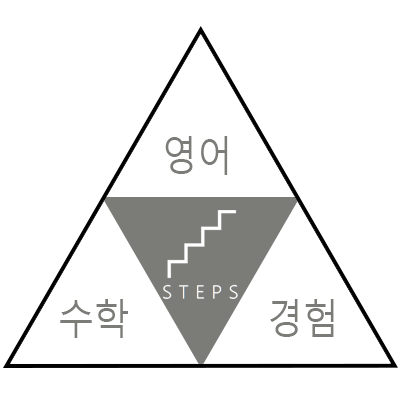
<style>
.page{position:relative;width:400px;height:400px;background:#ffffff}
.page>*{position:absolute;margin:0}
.t1{font:41.7px "MalgunGothicRegular";color:#7b7b78;scale:0.86 1}
</style>
<div class="page">
<p class="t1" style="left:165px;top:136px;width:63px;height:39px">영어</p>
<p class="t1" style="left:60px;top:299px;width:68px;height:39px">수학</p>
<p class="t1" style="left:270px;top:299px;width:64px;height:38px">경험</p>
</div>
